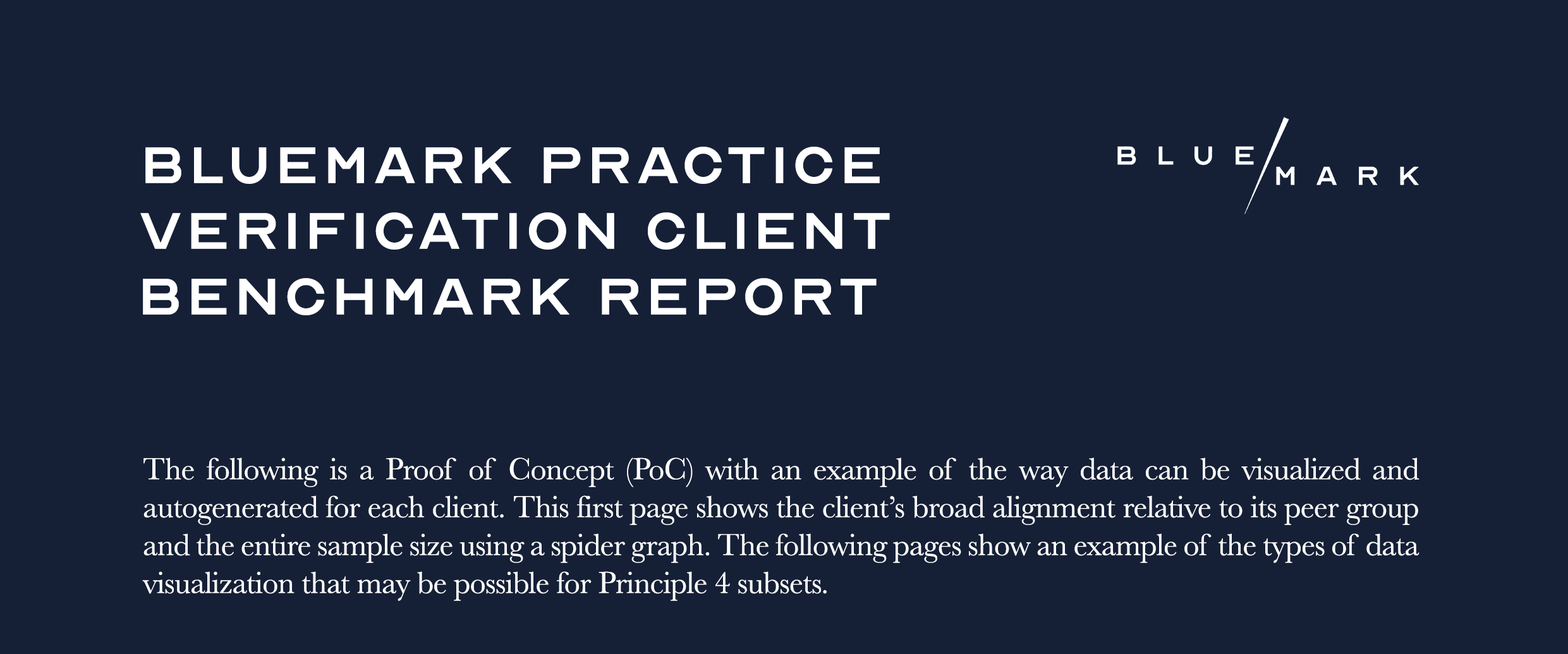
<style>
.page{position:relative;width:1568px;height:654px;background:#152037}
.page>*{position:absolute;margin:0}
.t1{font:71.1px "OpticianSans-Regular";letter-spacing:0.05em;color:#ffffff}
.t2{font:31.6px "Baskerville";letter-spacing:-0.015em;color:#ffffff}
</style>
<div class="page">
<p class="t1" style="left:145px;top:147px;width:735px;height:37px">BlueMark Practice</p>
<p class="t1" style="left:140px;top:212px;width:750px;height:38px">Verification Client</p>
<p class="t1" style="left:143px;top:278px;width:734px;height:37px">Benchmark Report</p>
<p class="t2" style="left:142px;top:458px;width:1277px;height:143px;text-align:justify">The following is a Proof of Concept (PoC) with an example of the way data can be visualized and autogenerated for each client. This first page shows the client’s broad alignment relative to its peer group and the entire sample size using a spider graph. The following pages show an example of the types of data visualization that may be possible for Principle 4 subsets.</p>
</div>
